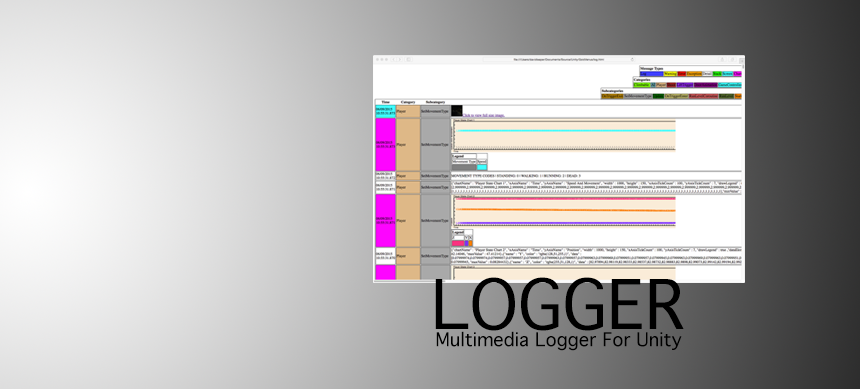
<style>
.page{position:relative;width:860px;height:389px}
.page>*{position:absolute;margin:0}
.t1{font:66px "Geneva";color:#000000}
.t2{font:18.2px "Geneva";color:#000000}
</style>
<div class="page">
<p class="t1" style="left:435px;top:277px;width:249px;height:54px">LOGGER</p>
<p class="t2" style="left:436px;top:331px;width:246px;height:20px">Multimedia Logger For Unity</p>
</div>
